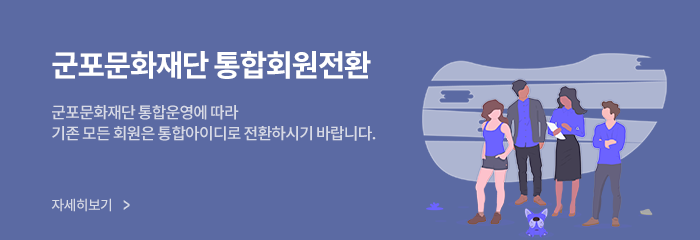
<style>
.page{position:relative;width:700px;height:240px;background:#5b6aa3}
.page>*{position:absolute;margin:0}
.t1{font:30px "NotoSansKR-Bold";letter-spacing:-0.05em;color:#ffffff}
.t2{font:16px/21px "NotoSansKR-Medium";letter-spacing:-0.05em;color:#d7dae6}
.t3{font:14px "NotoSansKR-Medium";letter-spacing:-0.05em;color:#d7dae6}
.t4{font:21px "NotoSansKR-Medium";letter-spacing:-0.05em;color:#d7dae6;scale:0.57 1}
</style>
<div class="page">
<p class="t1" style="left:52px;top:51px;width:319px;height:28px">군포문화재단 통합회원전환</p>
<p class="t2" style="left:52px;top:105px;width:324px;height:36px">군포문화재단 통합운영에 따라<br>기존 모든 회원은 통합아이디로 전환하시기 바랍니다.</p>
<p class="t3" style="left:51px;top:198px;width:60px;height:14px">자세히보기</p>
<p class="t4" style="left:123px;top:200px;width:7px;height:10px">&gt;</p>
</div>
